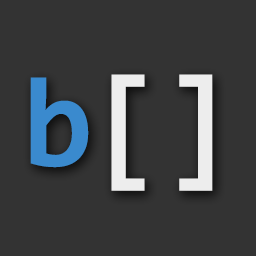
<style>
.page{position:relative;width:256px;height:256px;background:#333333}
.page>*{position:absolute;margin:0}
.t1{font:128px "Consolas-Bold";color:#ededed}
.t2{font:128px "Consolas-Bold";color:#3a8ace}
</style>
<div class="page">
<p class="t1" style="left:30px;top:74px;width:183px;height:117px"><span class="t2">b</span>[]</p>
</div>
